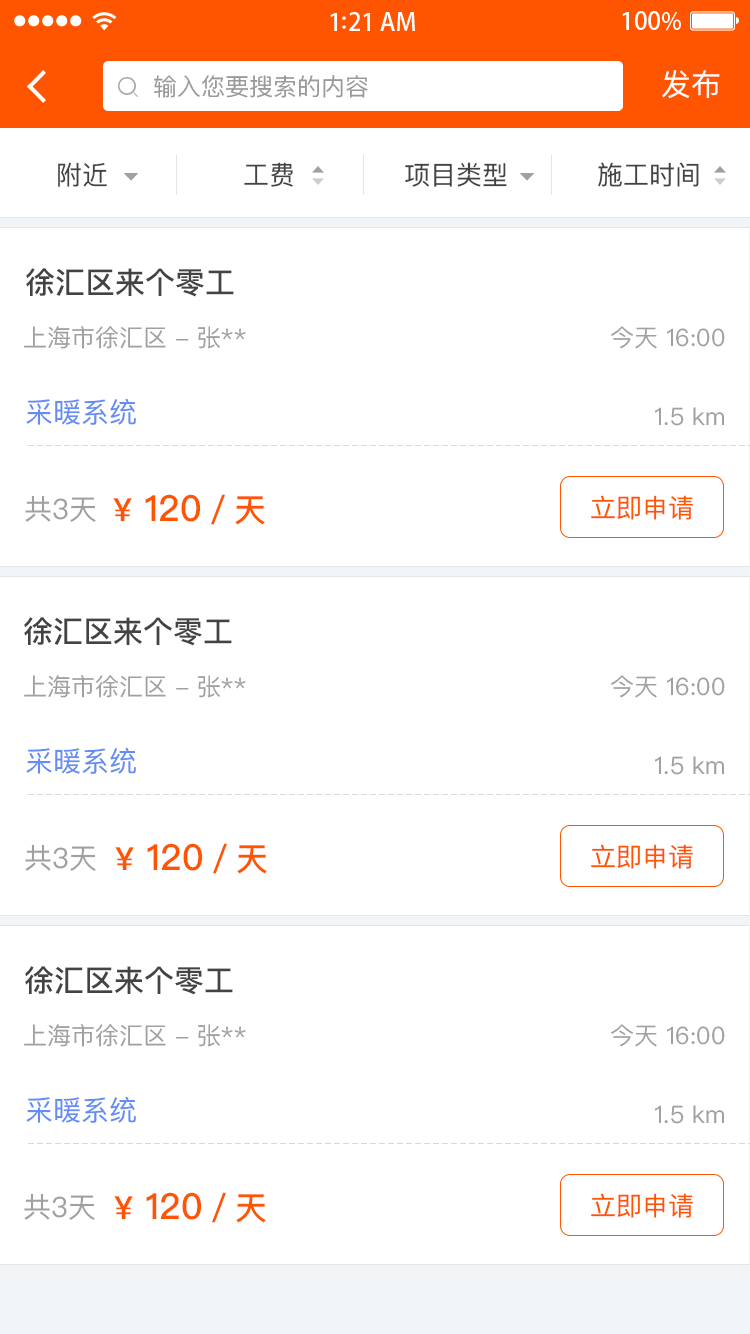
<style>
.page{position:relative;width:750px;height:1334px;background:#ffffff}
.page>*{position:absolute;margin:0}
.t1{font:24px "PingFangSC-Regular";color:#999999}
.t2{font:30px "PingFangSC-Regular";color:#ffffff}
.t3{font:26px "PingFangSC-Regular";color:#434343}
.t4{font:30px "PingFangSC-Medium";color:#434343}
.t5{font:24px "PingFangSC-Regular";color:#a0a0a0}
.t6{font:28px "PingFangSC-Regular";color:#648df4}
.t7{font:28px "PingFangSC-Regular";color:#a0a0a0}
.t8{font:36px "PingFangSC-Medium";color:#ff5400}
.t9{font:32px "PingFangSC-Medium";color:#ff5400}
.t10{font:26px "PingFangSC-Regular";color:#ff5400}
</style>
<div class="page">
<p class="t1" style="left:154px;top:75px;width:214px;height:23px">输入您要搜索的内容</p>
<p class="t2" style="left:662px;top:70px;width:58px;height:29px">发布</p>
<p class="t3" style="left:58px;top:162px;width:49px;height:25px">附近</p>
<p class="t3" style="left:244px;top:162px;width:49px;height:25px">工费</p>
<p class="t3" style="left:405px;top:162px;width:102px;height:25px">项目类型</p>
<p class="t3" style="left:598px;top:162px;width:101px;height:25px">施工时间</p>
<p class="t4" style="left:26px;top:268px;width:208px;height:29px">徐汇区来个零工</p>
<p class="t5" style="left:24px;top:326px;width:222px;height:23px">上海市徐汇区 - 张**</p>
<p class="t5" style="left:611px;top:326px;width:114px;height:23px">今天 16:00</p>
<p class="t6" style="left:26px;top:398px;width:110px;height:27px">采暖系统</p>
<p class="t5" style="left:655px;top:407px;width:69px;height:19px">1.5 km</p>
<p class="t7" style="left:25px;top:495px;width:71px;height:27px">共3天</p>
<p class="t8" style="left:113px;top:494px;width:152px;height:31px"><span class="t9">¥</span> 120<span class="t9">／天</span></p>
<p class="t10" style="left:591px;top:495px;width:102px;height:25px">立即申请</p>
<p class="t4" style="left:24px;top:617px;width:208px;height:29px">徐汇区来个零工</p>
<p class="t5" style="left:24px;top:675px;width:222px;height:23px">上海市徐汇区 - 张**</p>
<p class="t5" style="left:611px;top:675px;width:114px;height:23px">今天 16:00</p>
<p class="t6" style="left:26px;top:747px;width:110px;height:27px">采暖系统</p>
<p class="t5" style="left:655px;top:756px;width:69px;height:19px">1.5 km</p>
<p class="t7" style="left:25px;top:844px;width:71px;height:27px">共3天</p>
<p class="t8" style="left:115px;top:843px;width:152px;height:31px"><span class="t9">¥</span> 120<span class="t9">／天</span></p>
<p class="t10" style="left:591px;top:844px;width:102px;height:25px">立即申请</p>
<p class="t4" style="left:25px;top:966px;width:208px;height:29px">徐汇区来个零工</p>
<p class="t5" style="left:24px;top:1024px;width:222px;height:23px">上海市徐汇区 - 张**</p>
<p class="t5" style="left:611px;top:1024px;width:114px;height:23px">今天 16:00</p>
<p class="t6" style="left:26px;top:1096px;width:110px;height:27px">采暖系统</p>
<p class="t5" style="left:655px;top:1105px;width:69px;height:19px">1.5 km</p>
<p class="t7" style="left:24px;top:1193px;width:71px;height:27px">共3天</p>
<p class="t8" style="left:114px;top:1192px;width:152px;height:31px"><span class="t9">¥</span> 120<span class="t9">／天</span></p>
<p class="t10" style="left:591px;top:1193px;width:102px;height:25px">立即申请</p>
</div>
